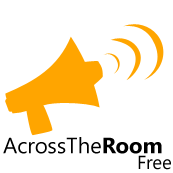
<style>
.page{position:relative;width:173px;height:173px;background:#ffffff}
.page>*{position:absolute;margin:0}
.t1{font:22px "SegoeUI";color:#000000}
.t2{font:22px "SegoeUI-Bold";color:#000000}
.t3{font:18.7px "SegoeUI";color:#000000}
</style>
<div class="page">
<p class="t1" style="left:3px;top:137px;width:159px;height:17px">AcrossThe<span class="t2">Room</span></p>
<p class="t3" style="left:138px;top:155px;width:33px;height:15px">Free</p>
</div>
